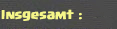
<style>
.page{position:relative;width:117px;height:29px}
.page>*{position:absolute;margin:0}
.t1{font:10px "Supercell-Magic";color:#f5f689}
</style>
<div class="page">
<p class="t1" style="left:1px;top:9px;width:81px;height:12px">Insgesamt :</p>
</div>
